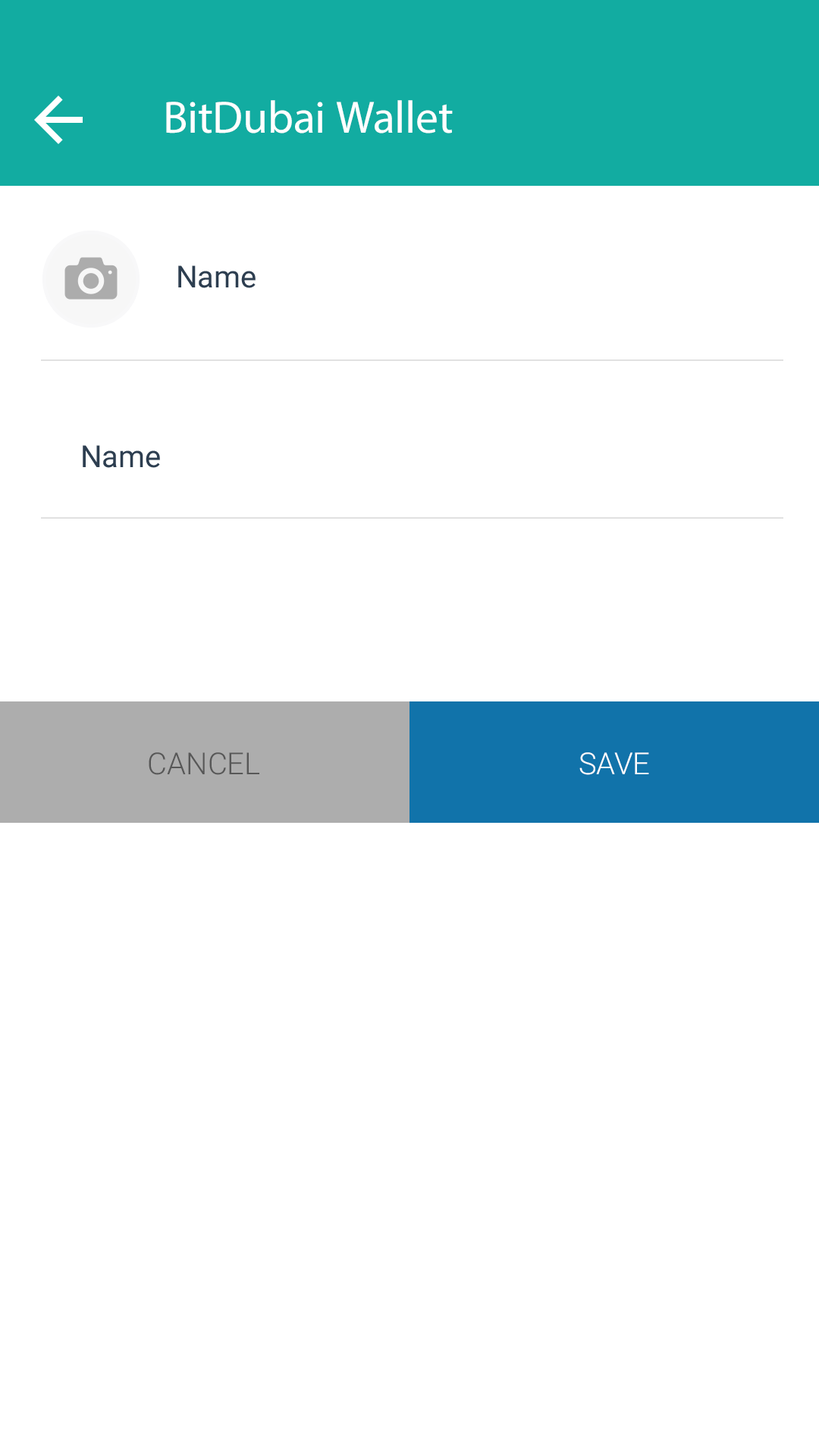
<style>
.page{position:relative;width:819px;height:1456px;background:#ffffff}
.page>*{position:absolute;margin:0}
.t1{font:45.5px "MyriadPro-Regular";letter-spacing:0.005em;color:#ffffff}
.t2{font:30.3px "Roboto-Regular";color:#2d3e50}
.t3{font:30.3px "Roboto-Light";color:#575757}
.t4{font:30.3px "Roboto-Light";color:#ffffff}
</style>
<div class="page">
<p class="t1" style="left:166px;top:100px;width:287px;height:33px">BitDubai Wallet</p>
<p class="t2" style="left:178px;top:265px;width:78px;height:23px">Name</p>
<p class="t2" style="left:83px;top:445px;width:77px;height:23px">Name</p>
<p class="t3" style="left:149px;top:752px;width:110px;height:23px">CANCEL</p>
<p class="t4" style="left:579px;top:752px;width:70px;height:23px">SAVE</p>
</div>
